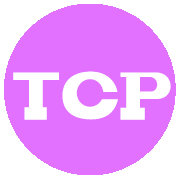
<style>
.page{position:relative;width:180px;height:180px;background:#e271ff}
.page>*{position:absolute;margin:0}
.t1{font:74px "MFWenYan_Noncommercial-Regular";color:#ffffff}
</style>
<div class="page">
<p class="t1" style="left:13px;top:71px;width:158px;height:49px">TCP</p>
</div>
